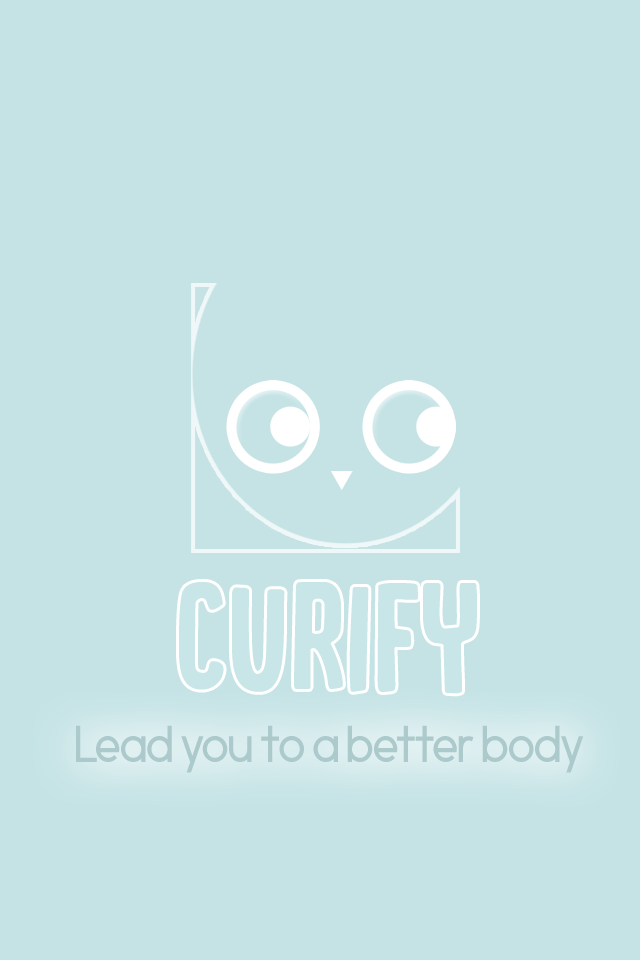
<style>
.page{position:relative;width:640px;height:960px;background:#c5e3e5}
.page>*{position:absolute;margin:0}
.t1{font:160.7px "DKCanoodle-Regular";color:#c8e5e7}
.t2{font:54.9px "Morningtype";color:#acc9cb}
</style>
<div class="page">
<p class="t1" style="left:179px;top:582px;width:298px;height:112px">Curify</p>
<p class="t2" style="left:76px;top:725px;width:508px;height:48px">Lead you to a better body</p>
</div>
